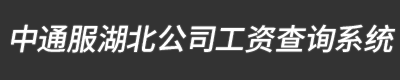
<style>
.page{position:relative;width:400px;height:80px;background:#333333}
.page>*{position:absolute;margin:0}
.t1{font:30px "SourceHanSansCN-Medium";letter-spacing:-0.01em;color:#ffffff;font-style:italic}
</style>
<div class="page">
<p class="t1" style="left:11px;top:24px;width:384px;height:29px">中通服湖北公司工资查询系统</p>
</div>
